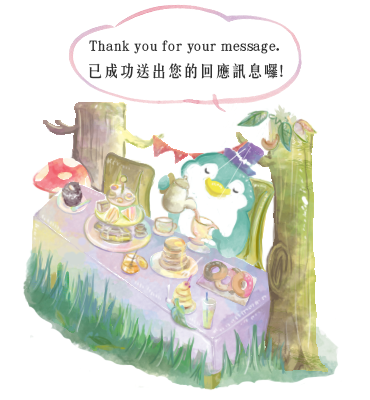
<style>
.page{position:relative;width:370px;height:400px;background:#ffffff}
.page>*{position:absolute;margin:0}
.t1{font:13.7px "CSong3HK-Medium";letter-spacing:0.04em;color:#313131}
.t2{font:16px "CSong3HK-Medium";color:#313131}
</style>
<div class="page">
<p class="t1" style="left:89px;top:40px;width:190px;height:14px">Thank you for your message.</p>
<p class="t2" style="left:89px;top:63px;width:194px;height:16px">已成功送出您的回應訊息囉!</p>
</div>
